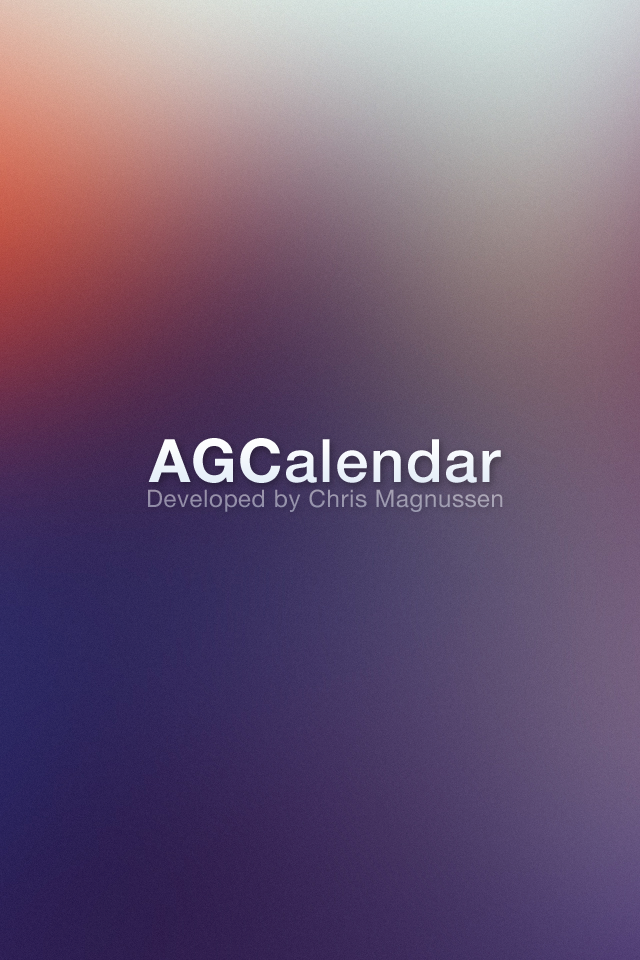
<style>
.page{position:relative;width:640px;height:960px}
.page>*{position:absolute;margin:0}
.t1{font:60px "HelveticaNeue-Medium";letter-spacing:0.025em;color:#eff5fb}
.t2{font:60px "HelveticaNeue-Bold";letter-spacing:0.025em;color:#eff5fb}
.t3{font:24px "HelveticaNeue";letter-spacing:0.025em;color:#9b96ad}
</style>
<div class="page">
<p class="t1" style="left:148px;top:438px;width:353px;height:45px"><span class="t2">AGC</span>alendar</p>
<p class="t3" style="left:148px;top:489px;width:355px;height:23px">Developed by Chris Magnussen</p>
</div>
